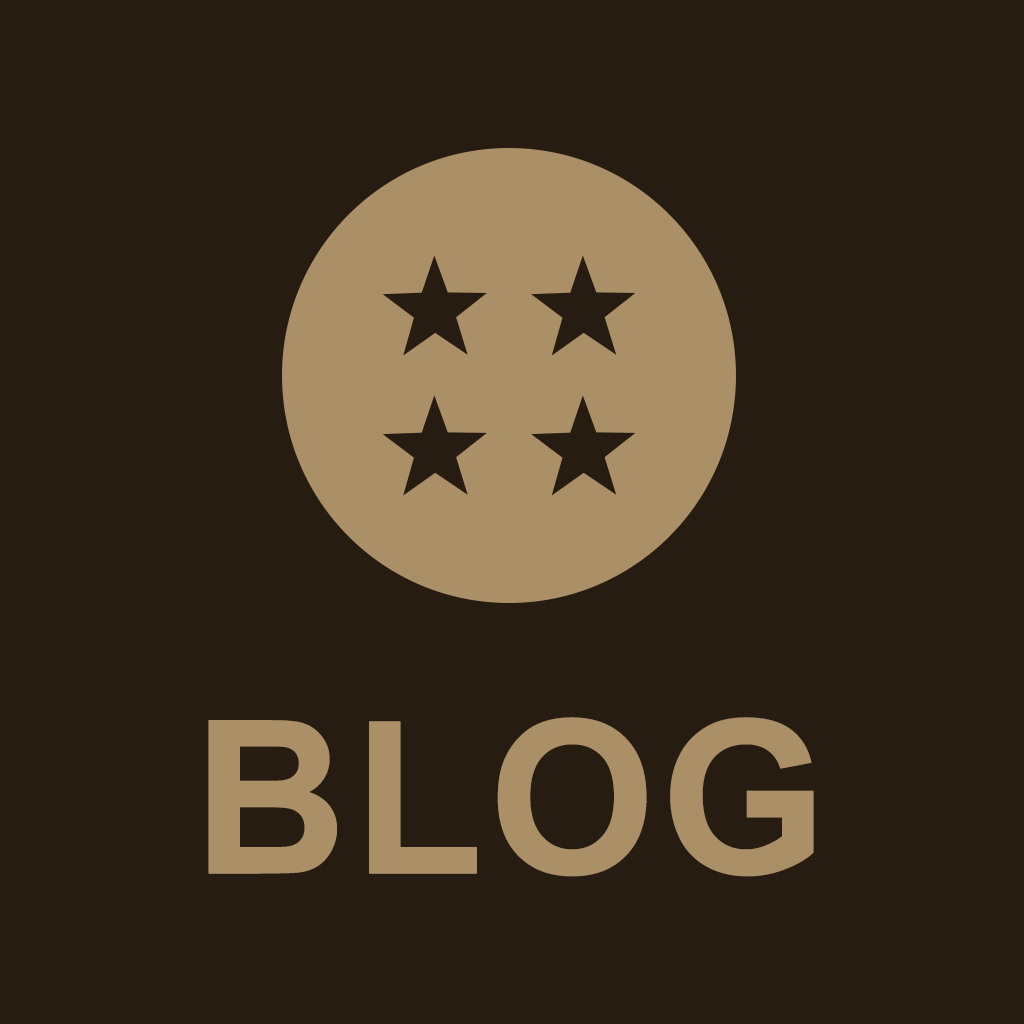
<style>
.page{position:relative;width:1024px;height:1024px;background:#261c12}
.page>*{position:absolute;margin:0}
.t1{font:213.3px "Arial-BoldMT";color:#ab8f67;font-weight:bold}
</style>
<div class="page">
<p class="t1" style="left:208px;top:717px;width:606px;height:160px">BLOG</p>
</div>
